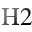
<style>
.page{position:relative;width:32px;height:32px;background:#ffffff}
.page>*{position:absolute;margin:0}
.t1{font:25px "Times-Roman"}
</style>
<div class="page">
<p class="t1" style="left:1px;top:8px;width:31px;height:17px">H2</p>
</div>
